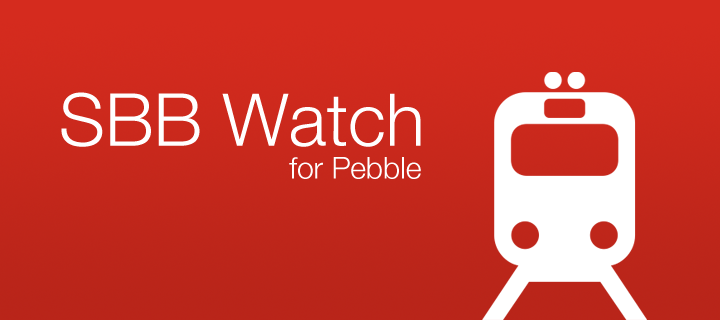
<style>
.page{position:relative;width:720px;height:320px}
.page>*{position:absolute;margin:0}
.t1{font:72.9px "HelveticaNeue-Light";color:#ffffff}
.t2{font:30px "HelveticaNeue-Light";color:#ffffff}
</style>
<div class="page">
<p class="t1" style="left:61px;top:92px;width:360px;height:55px">SBB Watch</p>
<p class="t2" style="left:289px;top:157px;width:132px;height:22px">for Pebble</p>
</div>
